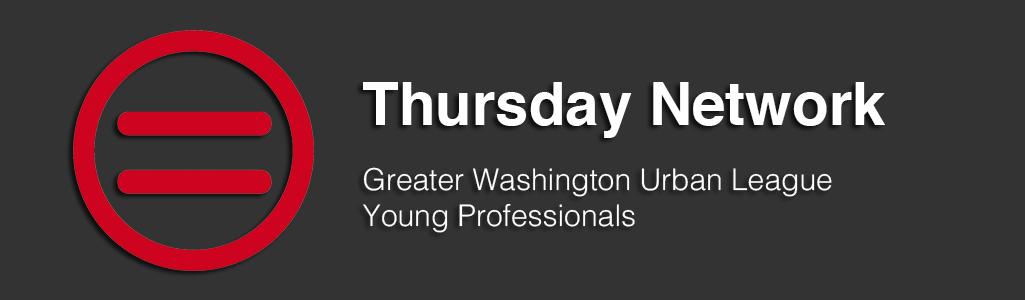
<style>
.page{position:relative;width:1025px;height:300px;background:#333333}
.page>*{position:absolute;margin:0}
.t1{font:60px "Helvetica-Bold";color:#ffffff}
.t2{font:30px "Helvetica-Light";color:#ffffff}
</style>
<div class="page">
<p class="t1" style="left:363px;top:82px;width:522px;height:56px">Thursday Network</p>
<p class="t2" style="left:363px;top:167px;width:469px;height:66px">Greater Washington Urban League <br>Young Professionals</p>
</div>
